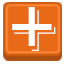
<style>
.page{position:relative;width:64px;height:64px;background:#e86a17}
.page>*{position:absolute;margin:0}
.t1{font:98.4px "Algerian";color:#ffffff}
</style>
<div class="page">
<p class="t1" style="left:12px;top:7px;width:44px;height:44px">+</p>
</div>
